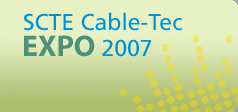
<style>
.page{position:relative;width:238px;height:112px;background:#e7f1c4}
.page>*{position:absolute;margin:0}
.t1{font:23px "FrutigerLTStd-Roman";color:#0092d7}
.t2{font:30px "MyriadPro-Bold";color:#4e917a}
</style>
<div class="page">
<p class="t1" style="left:24px;top:12px;width:158px;height:19px">SCTE Cable-Tec</p>
<p class="t2" style="left:24px;top:35px;width:127px;height:22px">EXPO <span class="t1">2007</span></p>
</div>
